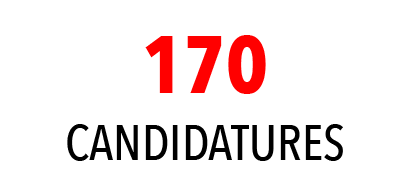
<style>
.page{position:relative;width:412px;height:196px;background:#ffffff}
.page>*{position:absolute;margin:0}
.t1{font:80px "AvenirNextCondensed-Bold";color:#ff0000;text-transform:uppercase}
.t2{font:50px "AvenirNextCondensed-Medium";color:#000000;text-transform:uppercase}
</style>
<div class="page">
<p class="t1" style="left:145px;top:35px;width:121px;height:59px">170</p>
<p class="t2" style="left:67px;top:124px;width:276px;height:37px">candidatures</p>
</div>
